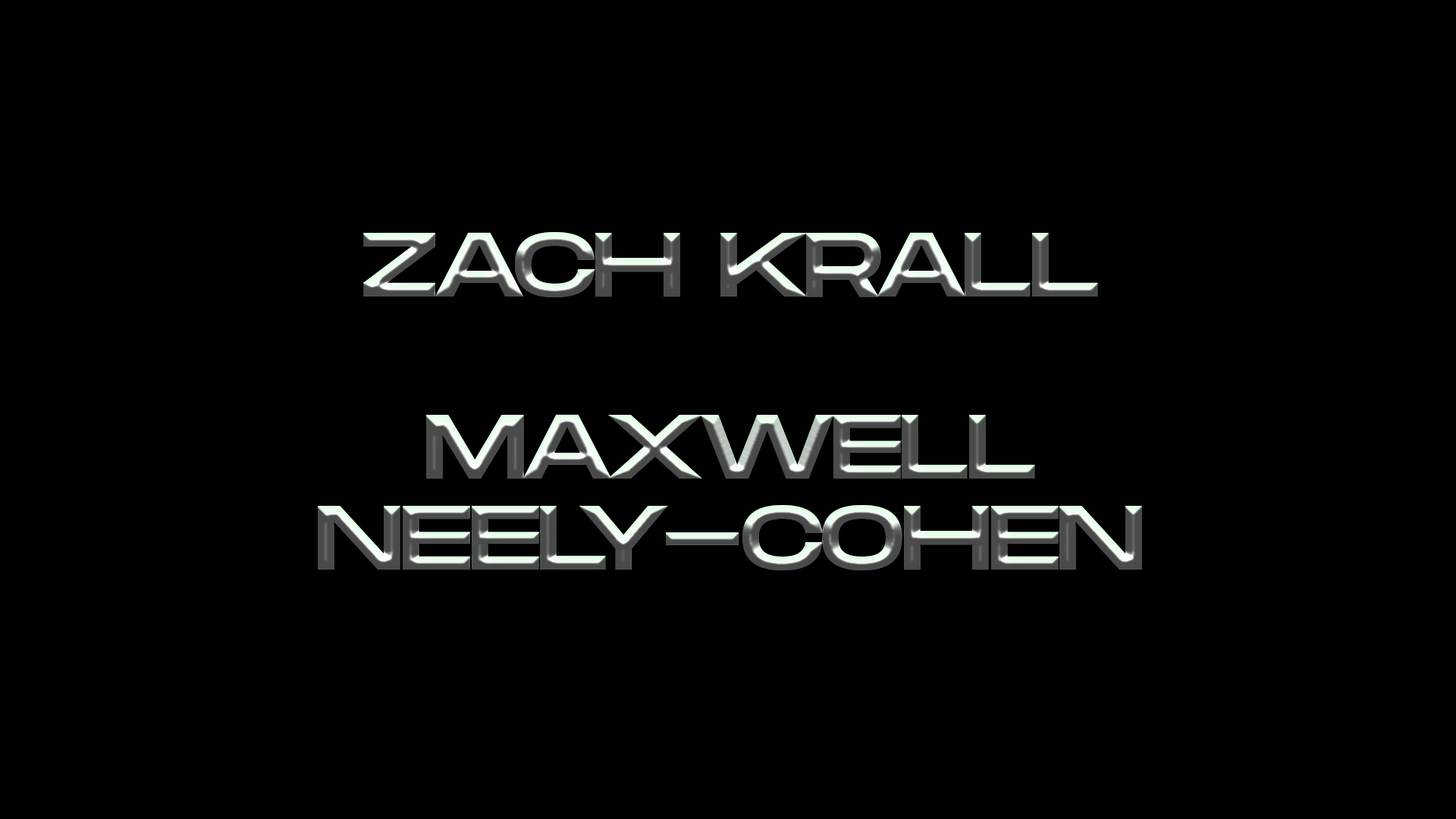
<style>
.page{position:relative;width:1456px;height:819px;background:#000000}
.page>*{position:absolute;margin:0}
.t1{font:91px/91px "MonumentExtended-Regular";letter-spacing:-0.05em}
</style>
<div class="page">
<p class="t1" style="left:318px;top:232px;width:824px;height:338px;text-align:center">ZACH KRALL<br><br>MAXWELL<br>NEELY-COHEN</p>
</div>
